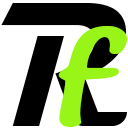
<style>
.page{position:relative;width:128px;height:128px;background:#ffffff}
.page>*{position:absolute;margin:0}
.t1{font:179.2px "Magneto-Bold";color:#000000;scale:0.84 1}
.t2{font:112px "SegoePrint-Bold";color:#99f518;scale:1.47 1}
</style>
<div class="page">
<p class="t1" style="left:1px;top:3px;width:126px;height:123px">R</p>
<p class="t2" style="left:58px;top:26px;width:69px;height:101px">f</p>
</div>
